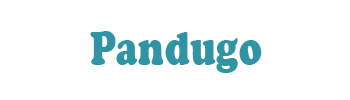
<style>
.page{position:relative;width:350px;height:100px;background:#ffffff}
.page>*{position:absolute;margin:0}
.t1{font:48px "CooperBlack";letter-spacing:0.02em;color:#3194a4;scale:0.79 1}
</style>
<div class="page">
<p class="t1" style="left:90px;top:31px;width:172px;height:42px">Pandugo</p>
</div>
